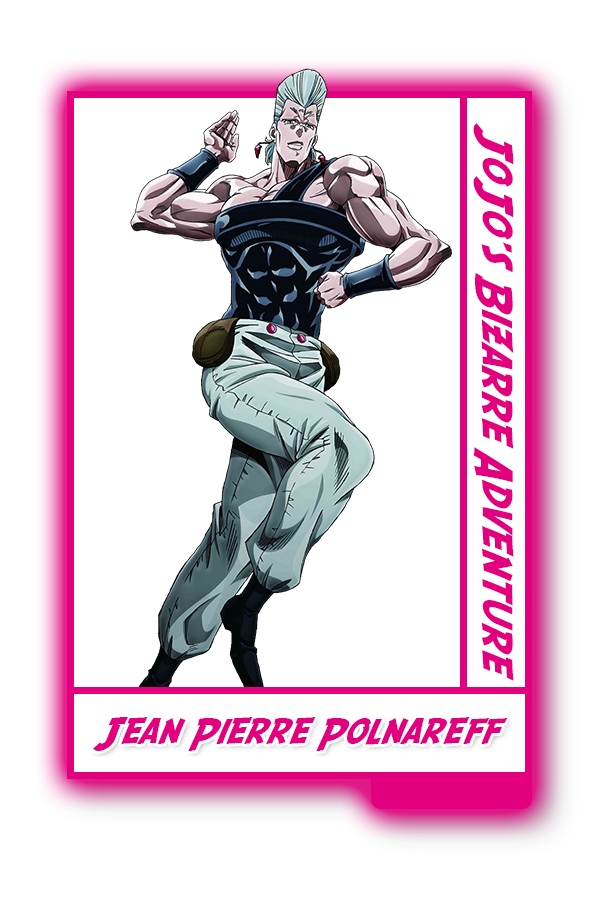
<style>
.page{position:relative;width:600px;height:900px;background:#ffffff}
.page>*{position:absolute;margin:0}
.t1{font:42.4px "SFFedora";color:#e3007e}
.t2{font:35.7px "SFFedora";color:#e3007e}
</style>
<div class="page">
<p class="t1" style="left:473px;top:123px;width:41px;height:558px;rotate:90deg">JoJo's Bizarre Adventure</p>
<p class="t2" style="left:93px;top:717px;width:415px;height:34px">Jean Pierre Polnareff</p>
</div>
